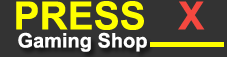
<style>
.page{position:relative;width:227px;height:57px;background:#333333}
.page>*{position:absolute;margin:0}
.t1{font:39px "Arial-BoldMT";color:#ffff00}
.t2{font:39px "Arial-BoldMT";color:#f5483f}
.t3{font:20px "Arial-BoldMT";color:#ffffff}
</style>
<div class="page">
<p class="t1" style="left:16px;top:1px;width:189px;height:29px">PRESS   <span class="t2">X</span></p>
<p class="t3" style="left:18px;top:32px;width:129px;height:20px">Gaming Shop</p>
</div>
